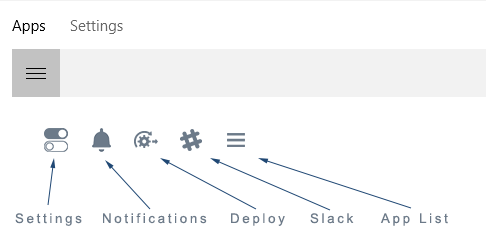
<style>
.page{position:relative;width:486px;height:245px;background:#ffffff}
.page>*{position:absolute;margin:0}
.t1{font:13.3px "ArialMT";letter-spacing:0.2em;color:#6c7a89}
</style>
<div class="page">
<p class="t1" style="left:15px;top:213px;width:67px;height:13px">Settings</p>
<p class="t1" style="left:103px;top:213px;width:104px;height:11px">Notifications</p>
<p class="t1" style="left:231px;top:213px;width:54px;height:13px">Deploy</p>
<p class="t1" style="left:310px;top:213px;width:44px;height:11px">Slack</p>
<p class="t1" style="left:380px;top:213px;width:68px;height:13px">App List</p>
</div>
